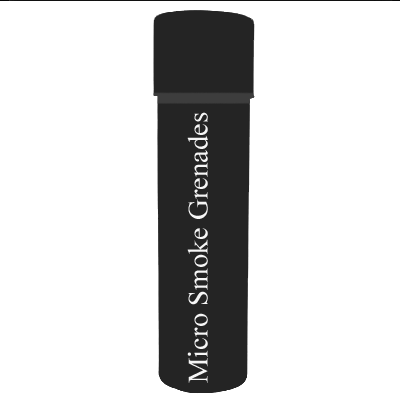
<style>
.page{position:relative;width:400px;height:400px;background:#ffffff}
.page>*{position:absolute;margin:0}
.t1{font:28.5px "TimesNewRomanPSMT"}
</style>
<div class="page">
<p class="t1" style="left:187px;top:111px;width:21px;height:271px;rotate:-90deg">Micro Smoke Grenades</p>
</div>
